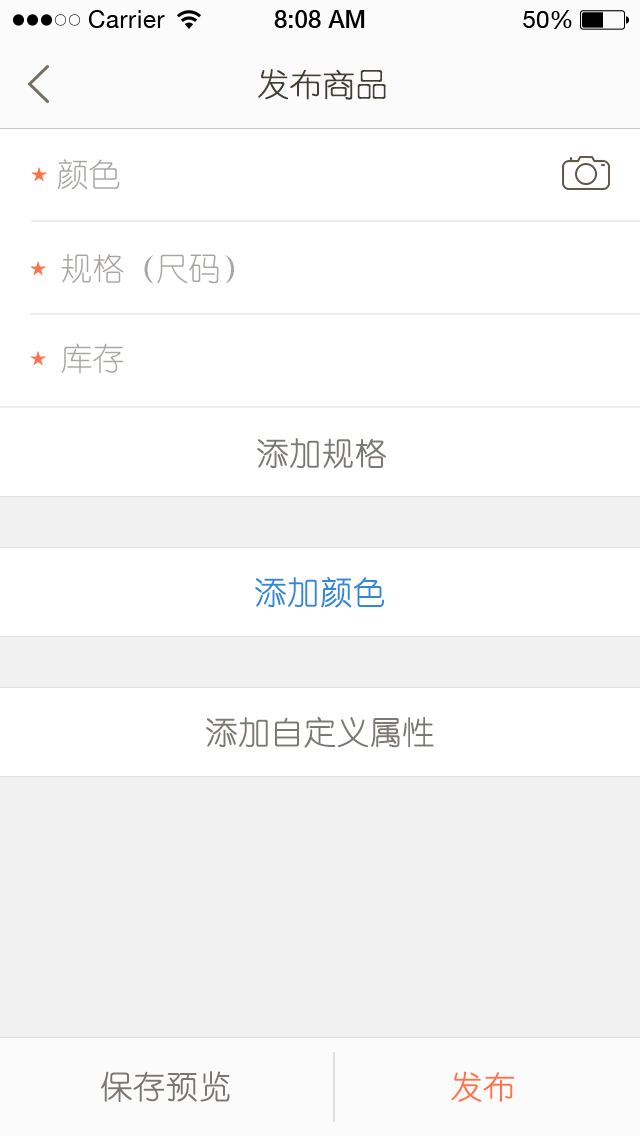
<style>
.page{position:relative;width:640px;height:1136px;background:#ffffff}
.page>*{position:absolute;margin:0}
.t1{font:32px "YouYuan";color:#433d33;text-transform:uppercase;font-weight:bold}
.t2{font:32px "YouYuan";color:#a7a6a3;text-transform:uppercase}
.t3{font:32px "YouYuan";color:#7b7973;text-transform:uppercase;font-weight:bold}
.t4{font:32px "YouYuan";color:#2f88da;text-transform:uppercase;font-weight:bold}
.t5{font:32px "YouYuan";color:#7a7772;text-transform:uppercase;font-weight:bold}
.t6{font:32px "YouYuan";color:#ff7248;text-transform:uppercase;font-weight:bold}
</style>
<div class="page">
<p class="t1" style="left:258px;top:69px;width:128px;height:31px">发布商品</p>
<p class="t2" style="left:57px;top:159px;width:63px;height:31px">颜色</p>
<p class="t2" style="left:61px;top:254px;width:173px;height:30px">规格（尺码）</p>
<p class="t2" style="left:61px;top:343px;width:63px;height:31px">库存</p>
<p class="t3" style="left:257px;top:438px;width:129px;height:31px">添加规格</p>
<p class="t4" style="left:255px;top:577px;width:129px;height:31px">添加颜色</p>
<p class="t3" style="left:206px;top:716px;width:228px;height:32px">添加自定义属性</p>
<p class="t5" style="left:101px;top:1071px;width:129px;height:31px">保存预览</p>
<p class="t6" style="left:451px;top:1071px;width:64px;height:31px">发布</p>
</div>
